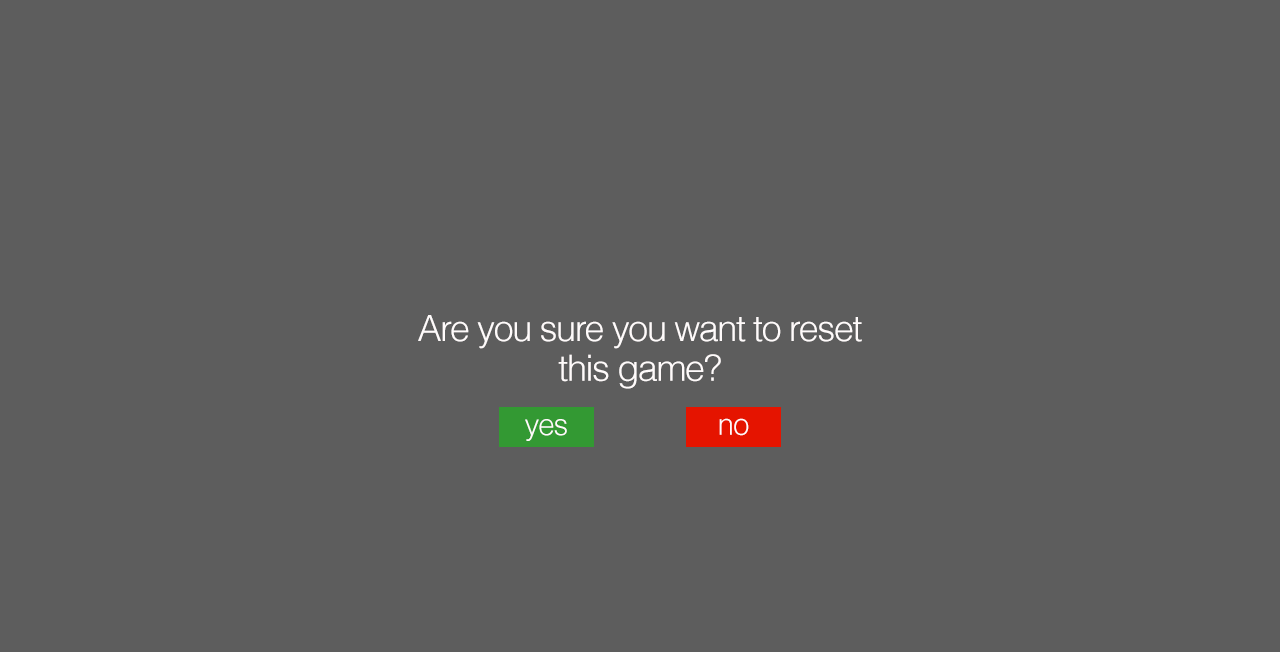
<style>
.page{position:relative;width:1280px;height:652px;background:#5d5d5d}
.page>*{position:absolute;margin:0}
.t1{font:36px/19.9px "Helvetica-Light";letter-spacing:-0.04em;color:#fffbfb}
.t2{font:30px "Helvetica-Light";letter-spacing:-0.04em;color:#fffbfb}
.t3{font:29.9px "Helvetica-Light";letter-spacing:-0.04em;color:#fffbfb}
</style>
<div class="page">
<p class="t1" style="left:418px;top:315px;width:444px;height:74px;text-align:center">Are you sure you want to reset <br><br>this game?</p>
<p class="t2" style="left:525px;top:419px;width:42px;height:22px">yes</p>
<p class="t3" style="left:719px;top:418px;width:30px;height:18px">no</p>
</div>
